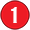
<style>
.page{position:relative;width:30px;height:30px;background:#ed1c24}
.page>*{position:absolute;margin:0}
.t1{font:25.2px "ARESSENCE";color:#ffffff}
</style>
<div class="page">
<p class="t1" style="left:11px;top:7px;width:6px;height:16px">1</p>
</div>
